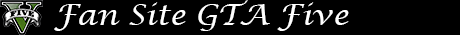
<style>
.page{position:relative;width:460px;height:35px;background:#000000}
.page>*{position:absolute;margin:0}
.t1{font:29.3px "LucidaCalligraphy-Italic";color:#ffffff}
</style>
<div class="page">
<p class="t1" style="left:54px;top:0px;width:295px;height:31px">Fan Site GTA Five</p>
</div>
